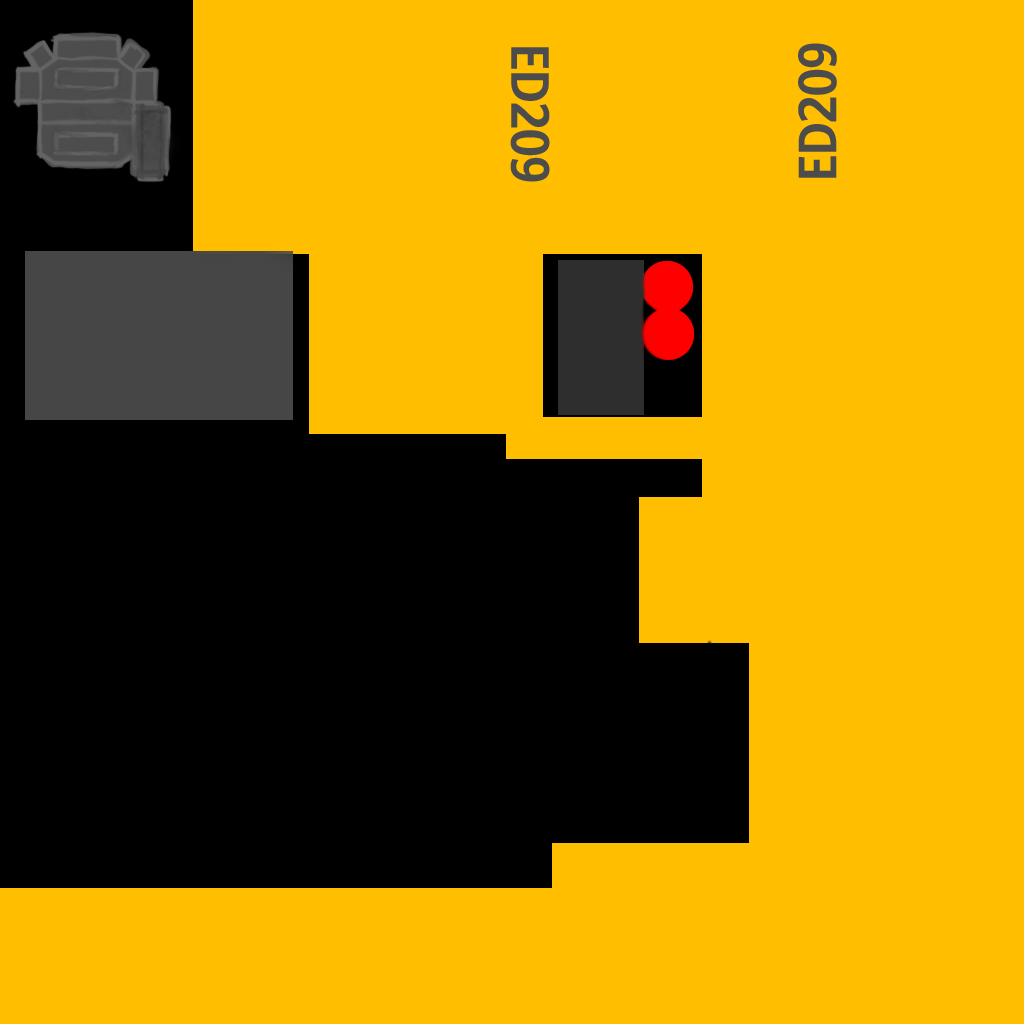
<style>
.page{position:relative;width:1024px;height:1024px;background:#ffbf00}
.page>*{position:absolute;margin:0}
.t1{font:50.9px "Stroudley-Bold";letter-spacing:-0.02em;color:#4c4c4c;text-transform:uppercase}
</style>
<div class="page">
<p class="t1" style="left:510px;top:47px;width:40px;height:135px;rotate:90deg">ED209</p>
<p class="t1" style="left:798px;top:43px;width:39px;height:135px;rotate:-90deg">ED209</p>
</div>
